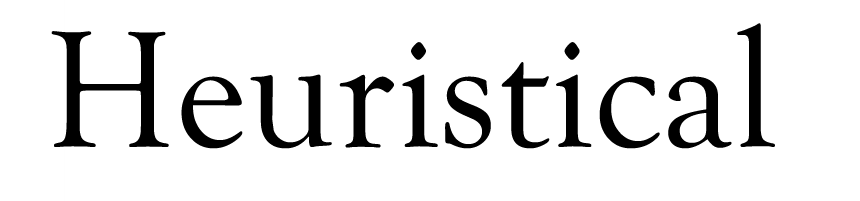
<style>
.page{position:relative;width:860px;height:201px;background:#ffffff}
.page>*{position:absolute;margin:0}
.t1{font:170px "GoudyOldStyleT-Regular";color:#000000}
</style>
<div class="page">
<p class="t1" style="left:51px;top:23px;width:724px;height:126px">Heuristical</p>
</div>
